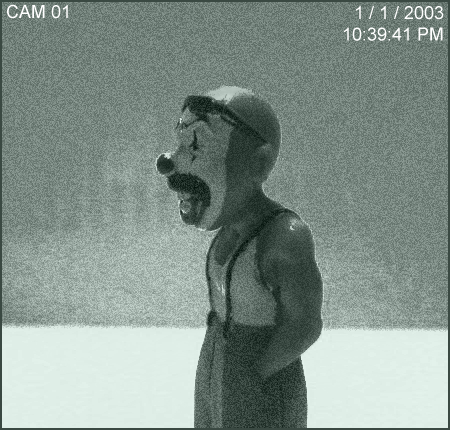
<style>
.page{position:relative;width:450px;height:430px}
.page>*{position:absolute;margin:0}
.t1{font:18px "ArialMT";color:#ffffff}
</style>
<div class="page">
<p class="t1" style="left:7px;top:4px;width:61px;height:15px">CAM 01</p>
<p class="t1" style="left:344px;top:6px;width:100px;height:35px;text-align:right">1 / 1 / 2003<br>10:39:41 PM</p>
</div>
